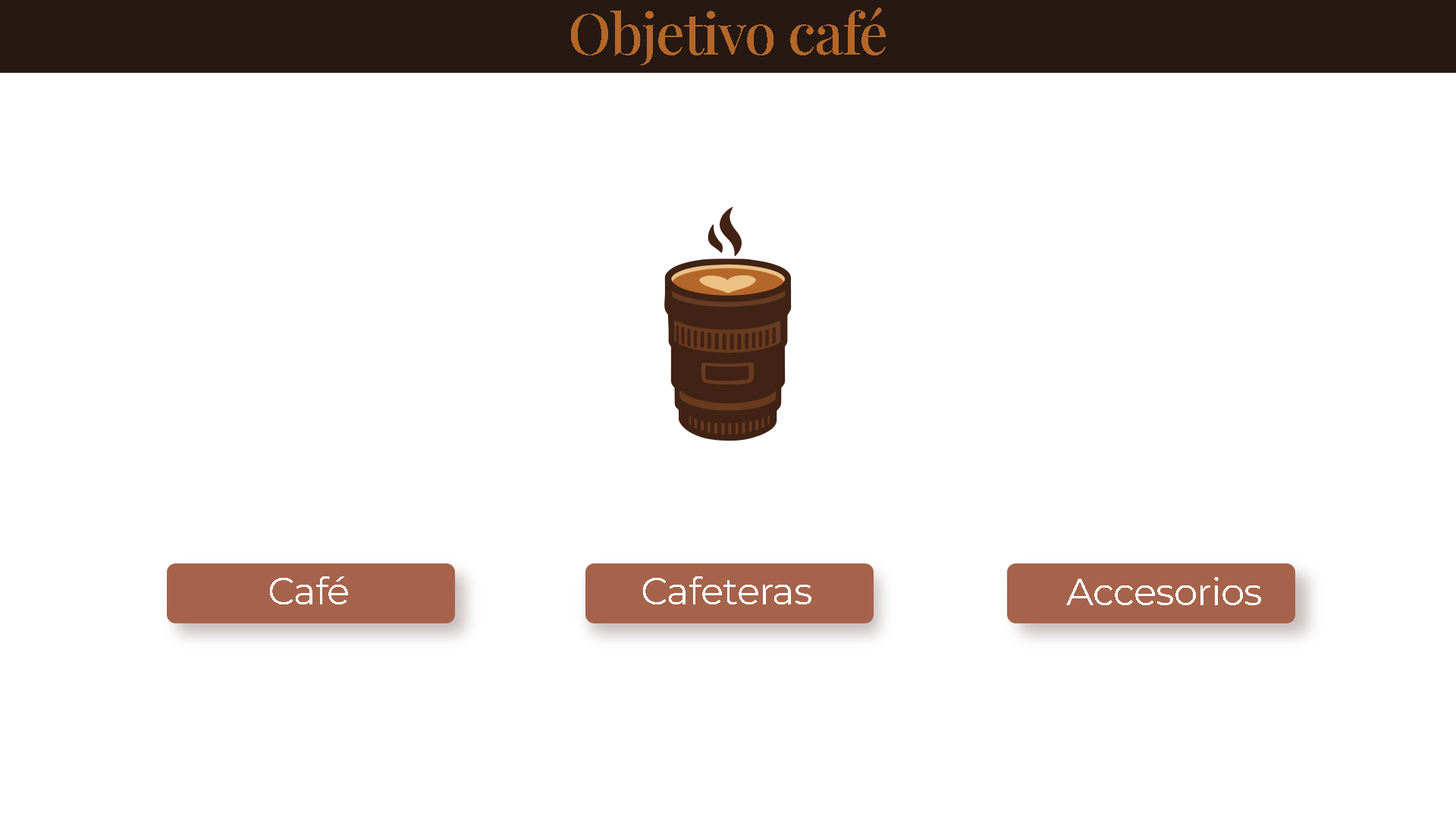
<style>
.page{position:relative;width:1456px;height:819px;background:#ffffff}
.page>*{position:absolute;margin:0}
.t1{font:56.8px "PlayfairDisplayRoman-Medium";letter-spacing:-0.02em;color:#b56729}
.t2{font:38.2px "Montserrat-Regular";letter-spacing:-0.02em;color:#fefefe}
</style>
<div class="page">
<p class="t1" style="left:571px;top:8px;width:315px;height:57px">Objetivo café</p>
<p class="t2" style="left:270px;top:576px;width:78px;height:28px">Café</p>
<p class="t2" style="left:643px;top:576px;width:168px;height:28px">Cafeteras</p>
<p class="t2" style="left:1066px;top:577px;width:195px;height:28px">Accesorios</p>
</div>
